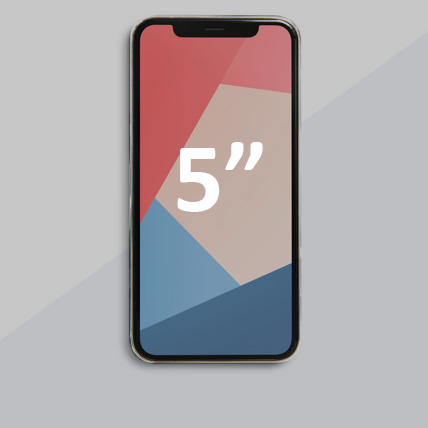
<style>
.page{position:relative;width:428px;height:428px;background:#bdbfc3}
.page>*{position:absolute;margin:0}
.t1{font:100px "Calibri-Bold";color:#ffffff}
</style>
<div class="page">
<p class="t1" style="left:177px;top:142px;width:86px;height:70px">5”</p>
</div>
